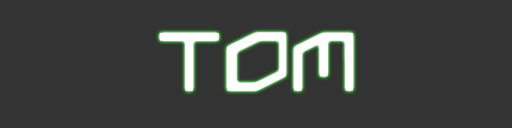
<style>
.page{position:relative;width:512px;height:128px;background:#333333}
.page>*{position:absolute;margin:0}
.t1{font:82px "KinineAlpha";color:#ffffff}
</style>
<div class="page">
<p class="t1" style="left:159px;top:32px;width:194px;height:59px">Tom</p>
</div>
